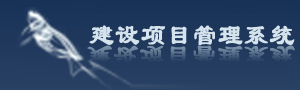
<style>
.page{position:relative;width:300px;height:90px}
.page>*{position:absolute;margin:0}
.t1{font:25.8px "JFangLi";color:#d5e3ec}
.t2{font:22px "JFangLi";scale:1.18 1}
</style>
<div class="page">
<p class="t1" style="left:89px;top:25px;width:206px;height:21px">建设项目管理系统</p>
<p class="t2" style="left:87px;top:45px;width:208px;height:18px">建设项目管理系统</p>
</div>
